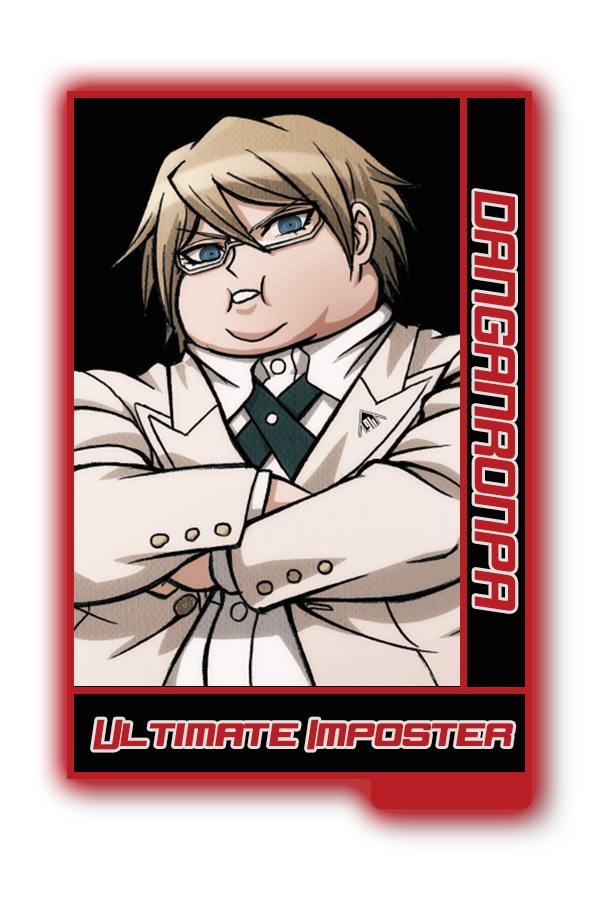
<style>
.page{position:relative;width:600px;height:900px;background:#ffffff}
.page>*{position:absolute;margin:0}
.t1{font:48.8px "DorBlue";color:#bb2c2e}
.t2{font:35.7px "DorBlue";color:#bb2c2e}
</style>
<div class="page">
<p class="t1" style="left:474px;top:191px;width:42px;height:420px;rotate:90deg">DANGANRONPA</p>
<p class="t2" style="left:93px;top:719px;width:421px;height:31px">Ultimate Imposter</p>
</div>
